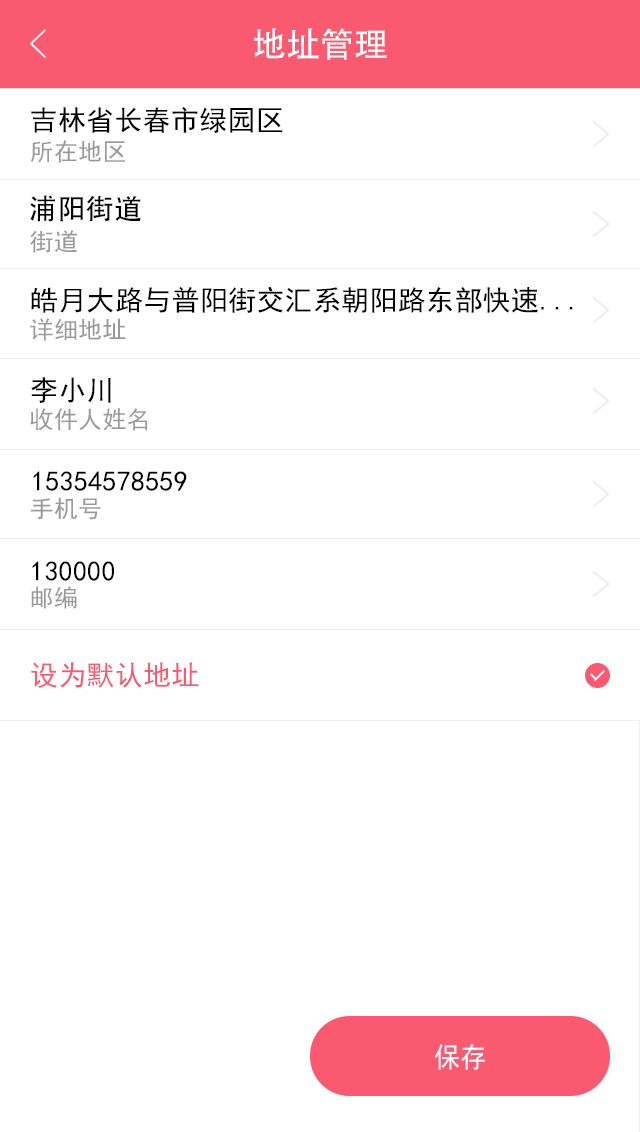
<style>
.page{position:relative;width:640px;height:1132px;background:#ffffff}
.page>*{position:absolute;margin:0}
.t1{font:40px "FZYXJW--GB1-0";color:#ffffff}
.t2{font:34px "AdobeHeitiStd-Regular";color:#ffffff}
.t3{font:28px "SimHei";letter-spacing:0.01em;color:#000000}
.t4{font:24px "SimHei";letter-spacing:0.01em;color:#999999}
.t5{font:28px "AdobeHeitiStd-Regular";letter-spacing:0.01em;color:#000000}
.t6{font:28px "SimHei";letter-spacing:0.01em;color:#f95a70}
.t7{font:28px "SimHei";color:#ffffff;scale:0.94 1}
</style>
<div class="page">
<p class="t1" style="left:29px;top:29px;width:17px;height:29px">&lt;</p>
<p class="t2" style="left:254px;top:28px;width:133px;height:32px">地址管理</p>
<p class="t3" style="left:31px;top:107px;width:252px;height:26px">吉林省长春市绿园区</p>
<p class="t4" style="left:30px;top:140px;width:95px;height:23px">所在地区</p>
<p class="t5" style="left:30px;top:195px;width:111px;height:27px">浦阳街道</p>
<p class="t4" style="left:30px;top:230px;width:47px;height:23px">街道</p>
<p class="t3" style="left:31px;top:286px;width:542px;height:27px">皓月大路与普阳街交汇系朝阳路东部快速...</p>
<p class="t4" style="left:30px;top:318px;width:96px;height:23px">详细地址</p>
<p class="t3" style="left:31px;top:377px;width:80px;height:26px">李小川</p>
<p class="t4" style="left:30px;top:408px;width:117px;height:23px">收件人姓名</p>
<p class="t3" style="left:33px;top:471px;width:154px;height:20px">15354578559</p>
<p class="t4" style="left:31px;top:497px;width:70px;height:23px">手机号</p>
<p class="t3" style="left:32px;top:561px;width:82px;height:20px">130000</p>
<p class="t4" style="left:31px;top:586px;width:46px;height:23px">邮编</p>
<p class="t6" style="left:31px;top:662px;width:168px;height:26px">设为默认地址</p>
<p class="t7" style="left:434px;top:1044px;width:51px;height:26px">保存</p>
</div>
